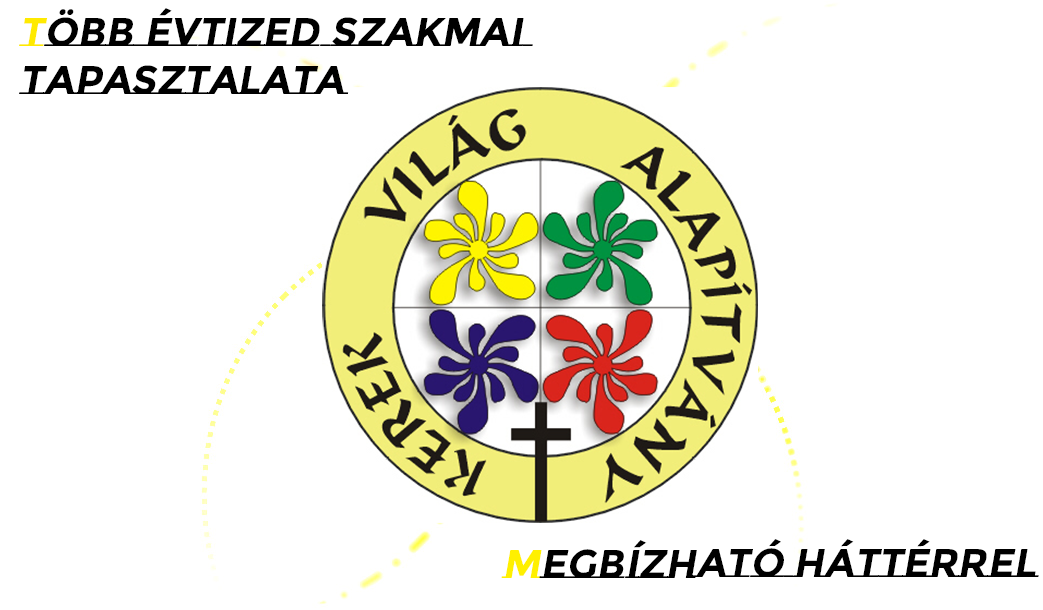
<style>
.page{position:relative;width:1043px;height:610px;background:#ffffff}
.page>*{position:absolute;margin:0}
.t1{font:40px "MontserratSubrayada-Bold";color:#000000;font-style:italic}
.t2{font:40px "MontserratSubrayada-Bold";color:#ffea00;font-style:italic}
.t3{font:40px "MontserratSubrayada-Bold";color:#fff000;font-style:italic}
</style>
<div class="page">
<p class="t1" style="left:19px;top:8px;width:514px;height:86px"><span class="t2">T</span>öbb évtized szakmai <br>tapasztalata</p>
<p class="t1" style="left:501px;top:539px;width:538px;height:39px"><span class="t3">M</span>egbízható háttérREL</p>
</div>
